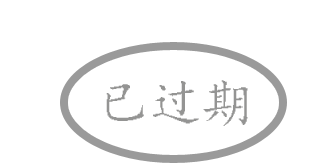
<style>
.page{position:relative;width:335px;height:168px;background:#ffffff}
.page>*{position:absolute;margin:0}
.t1{font:51.3px "¿¬Ìå-Regular";color:#949493}
</style>
<div class="page">
<p class="t1" style="left:106px;top:80px;width:142px;height:46px">已过期</p>
</div>
